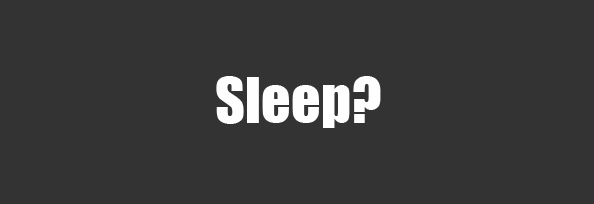
<style>
.page{position:relative;width:594px;height:204px;background:#333333}
.page>*{position:absolute;margin:0}
.t1{font:58.3px "Impact";color:#fffefe}
</style>
<div class="page">
<p class="t1" style="left:216px;top:76px;width:165px;height:52px">Sleep?</p>
</div>
